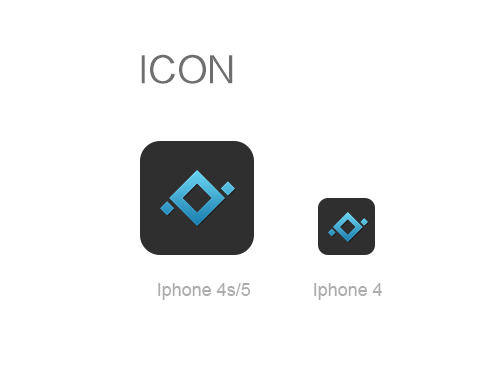
<style>
.page{position:relative;width:482px;height:368px;background:#ffffff}
.page>*{position:absolute;margin:0}
.t1{font:36px "FZLTHK--GBK1-0";color:#6f6f6f}
.t2{font:18px "ArialMT";color:#adadad}
</style>
<div class="page">
<p class="t1" style="left:141px;top:54px;width:92px;height:30px">ICON</p>
<p class="t2" style="left:158px;top:283px;width:93px;height:17px">Iphone 4s/5</p>
<p class="t2" style="left:314px;top:283px;width:68px;height:17px">Iphone 4</p>
</div>
